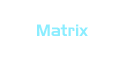
<style>
.page{position:relative;width:123px;height:60px;background:#ffffff}
.page>*{position:absolute;margin:0}
.t1{font:16px "AeroRegularSWFTE";color:#8bedff}
</style>
<div class="page">
<p class="t1" style="left:37px;top:24px;width:51px;height:12px">Matrix</p>
</div>
